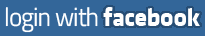
<style>
.page{position:relative;width:205px;height:36px;background:#336699}
.page>*{position:absolute;margin:0}
.t1{font:25.9px "TitilliumWeb-Regular";letter-spacing:-0.04em;color:#ffffff}
.t2{font:25.9px "KlavikaBold-Bold";letter-spacing:-0.02em;color:#ffffff}
</style>
<div class="page">
<p class="t1" style="left:5px;top:7px;width:195px;height:26px">login with <span class="t2">facebook</span></p>
</div>
